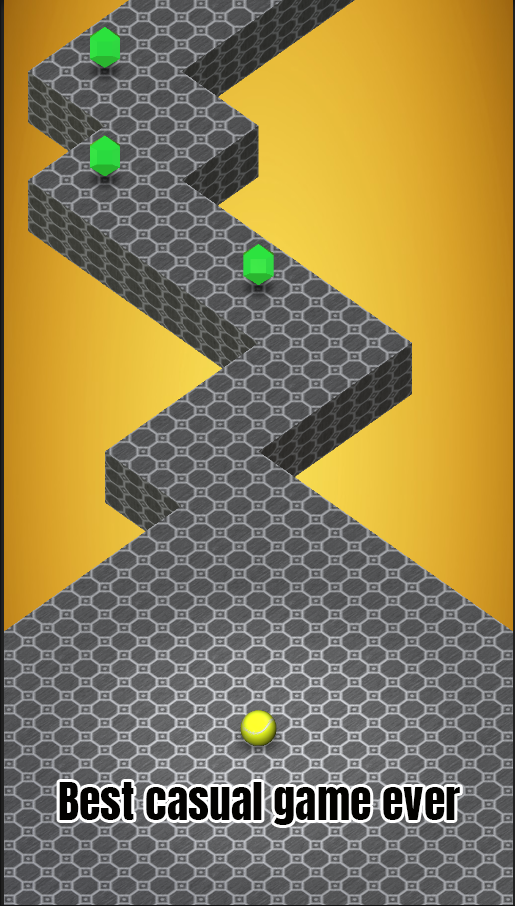
<style>
.page{position:relative;width:515px;height:906px}
.page>*{position:absolute;margin:0}
.t1{font:44px "Anton-Regular";color:#030200}
</style>
<div class="page">
<p class="t1" style="left:59px;top:782px;width:401px;height:43px">Best casual game ever</p>
</div>
